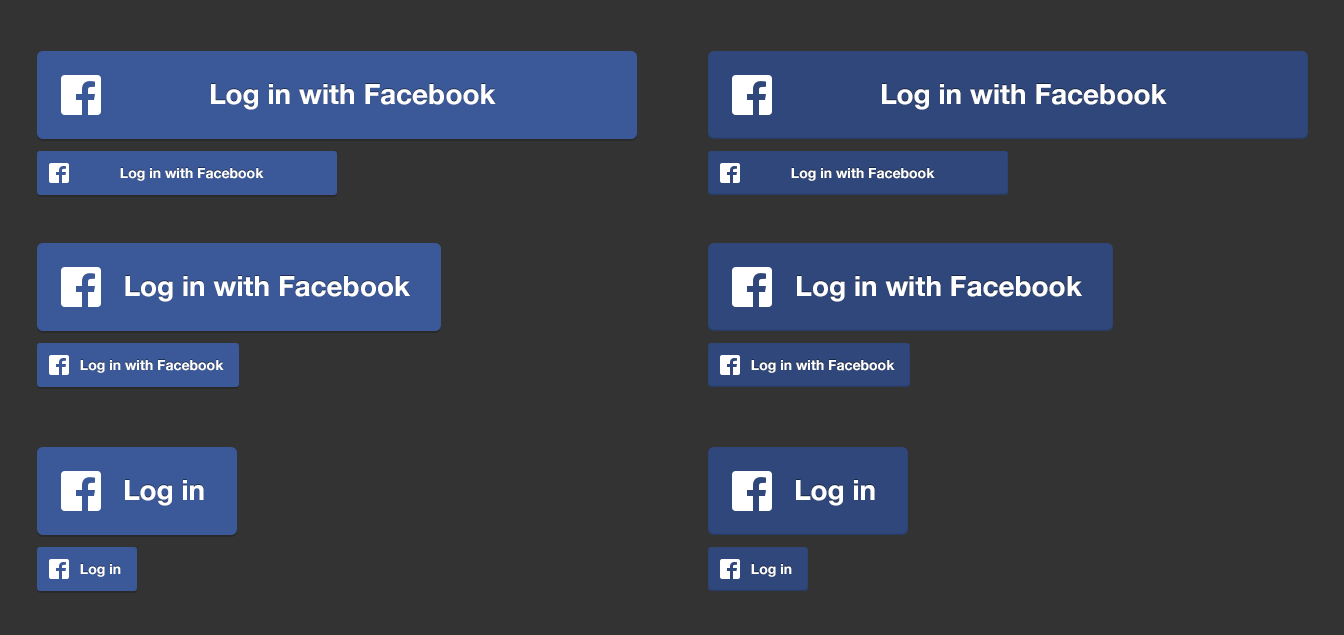
<style>
.page{position:relative;width:1344px;height:635px;background:#333333}
.page>*{position:absolute;margin:0}
.t1{font:28px "HelveticaNeue-Bold";color:#ffffff}
.t2{font:14px/30px "HelveticaNeue-Bold";color:#ffffff}
.t3{font:14px/30px "HelveticaNeue-Bold";color:#ff0000}
.t4{font:28px/24px "HelveticaNeue-Bold";color:#ffffff}
.t5{font:14px/24px "HelveticaNeue-Bold";color:#ffffff}
</style>
<div class="page">
<p class="t1" style="left:211px;top:84px;width:285px;height:26px">Log in with Facebook</p>
<p class="t1" style="left:882px;top:84px;width:285px;height:26px">Log in with Facebook</p>
<p class="t2" style="left:120px;top:168px;width:144px;height:13px">Log in with Facebook<br><span class="t3">we love you!<br></span>v</p>
<p class="t2" style="left:791px;top:168px;width:144px;height:13px">Log in with Facebook<br><span class="t3">we love you!<br></span>v</p>
<p class="t1" style="left:125px;top:276px;width:285px;height:26px">Log in with Facebook</p>
<p class="t1" style="left:797px;top:276px;width:285px;height:26px">Log in with Facebook</p>
<p class="t2" style="left:80px;top:360px;width:144px;height:13px">Log in with Facebook<br><span class="t3">we love you!<br></span>v</p>
<p class="t2" style="left:751px;top:360px;width:144px;height:13px">Log in with Facebook<br>v</p>
<p class="t4" style="left:125px;top:480px;width:79px;height:26px">Log in<br>v</p>
<p class="t4" style="left:796px;top:480px;width:79px;height:26px">Log in<br>v</p>
<p class="t5" style="left:80px;top:564px;width:41px;height:13px">Log in<br>v</p>
<p class="t5" style="left:751px;top:564px;width:41px;height:13px">Log in<br>v</p>
</div>
